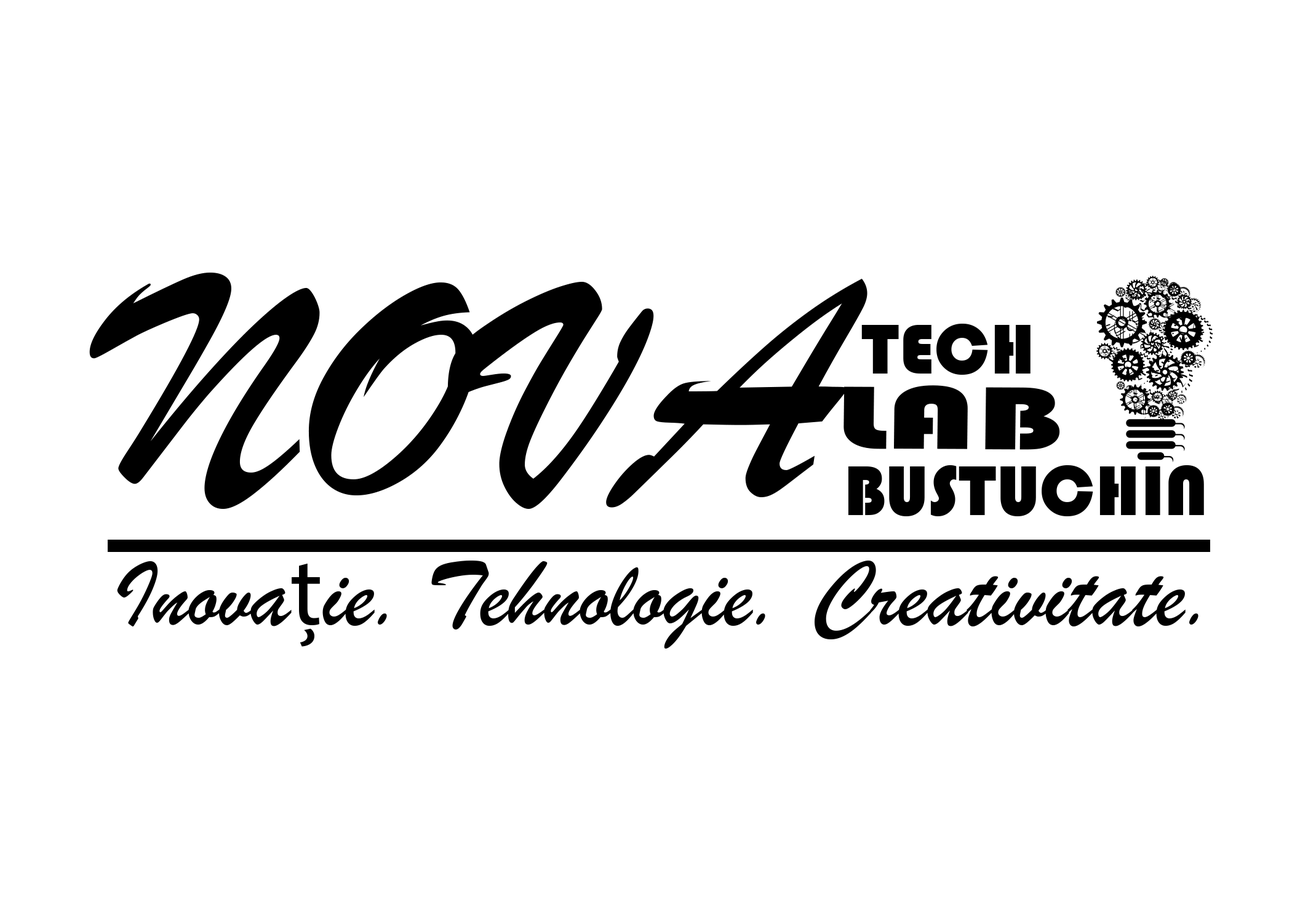
<style>
.page{position:relative;width:1292px;height:923px;background:#ffffff}
.page>*{position:absolute;margin:0}
.t1{font:330.3px "BrushScriptMT";color:#000000}
.t2{font:73.4px "Bauhaus93";color:#000000}
.t3{font:92.8px "Bauhaus93";color:#000000;scale:1.63 1}
.t4{font:97.9px "BrushScriptMT";color:#000000}
.t5{font:97.9px "MyriadPro-Regular";color:#000000}
</style>
<div class="page">
<p class="t1" style="left:89px;top:273px;width:779px;height:236px">NOVA</p>
<p class="t2" style="left:861px;top:324px;width:170px;height:51px">TECH</p>
<p class="t3" style="left:844px;top:385px;width:216px;height:65px">LAB</p>
<p class="t2" style="left:848px;top:465px;width:356px;height:51px">BUSTUCHIN</p>
<p class="t4" style="left:117px;top:561px;width:1082px;height:87px">Inova<span class="t5">ț</span>ie. Tehnologie. Creativitate.</p>
</div>
